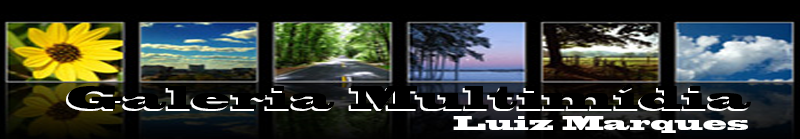
<style>
.page{position:relative;width:800px;height:139px}
.page>*{position:absolute;margin:0}
.t1{font:30px "BlackoakStd";color:#000000}
.t2{font:18px "BlackoakStd";color:#ffffff}
</style>
<div class="page">
<p class="t1" style="left:68px;top:84px;width:683px;height:25px">Galeria Multimídia</p>
<p class="t2" style="left:453px;top:116px;width:295px;height:17px">Luiz Marques</p>
</div>
